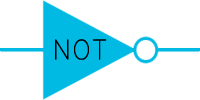
<style>
.page{position:relative;width:200px;height:100px;background:#ffffff}
.page>*{position:absolute;margin:0}
.t1{font:26.1px "SWSimp";color:#000000;scale:0.94 1}
</style>
<div class="page">
<p class="t1" style="left:55px;top:39px;width:52px;height:21px">NOT</p>
</div>
